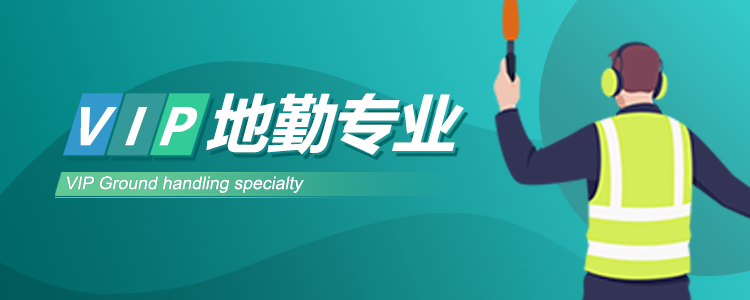
<style>
.page{position:relative;width:750px;height:300px}
.page>*{position:absolute;margin:0}
.t1{font:62.6px "MicrosoftYaHei-Bold";color:#ffffff;font-style:italic}
.t2{font:50.9px "MicrosoftYaHei-Bold";color:#ffffff;font-style:italic}
.t3{font:17.7px "ArialMT";color:#ffffff;font-style:italic}
</style>
<div class="page">
<p class="t1" style="left:206px;top:93px;width:258px;height:62px">地勤专业</p>
<p class="t2" style="left:80px;top:107px;width:37px;height:39px">V</p>
<p class="t2" style="left:125px;top:107px;width:22px;height:39px">I</p>
<p class="t2" style="left:159px;top:107px;width:39px;height:39px">P</p>
<p class="t3" style="left:67px;top:176px;width:237px;height:17px">VIP Ground handling specialty</p>
</div>
